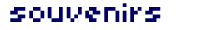
<style>
.page{position:relative;width:200px;height:30px;background:#ffffff}
.page>*{position:absolute;margin:0}
.t1{font:30px "04b03";color:#000066}
</style>
<div class="page">
<p class="t1" style="left:10px;top:3px;width:151px;height:19px">souvenirs</p>
</div>
